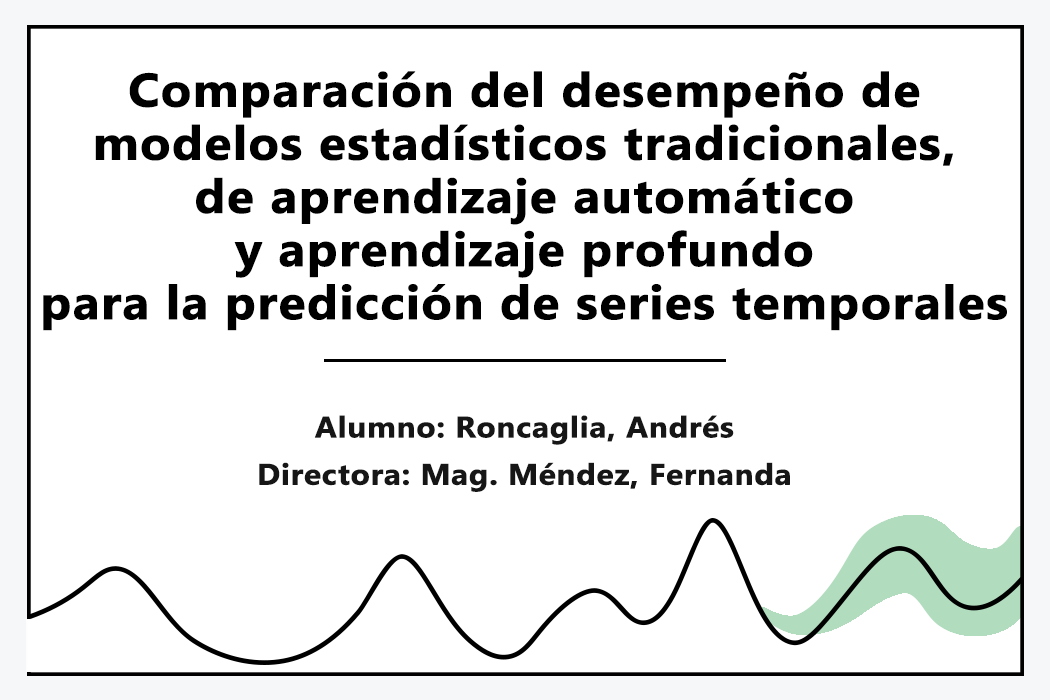
<style>
.page{position:relative;width:1050px;height:700px;background:#ffffff}
.page>*{position:absolute;margin:0}
.t1{font:47.2px/53.1px "Gadugi-Bold";color:#000000;font-weight:bold;scale:1.06 1}
.t2{font:29.5px/47.2px "Gadugi-Bold";color:#161616;font-weight:bold;scale:1.06 1}
</style>
<div class="page">
<p class="t1" style="left:43px;top:71px;width:964px;height:260px;text-align:center">Comparación del desempeño de modelos estadísticos tradicionales, <br>de aprendizaje automático <br>y aprendizaje profundo <br>para la predicción de series temporales</p>
<p class="t2" style="left:259px;top:415px;width:531px;height:77px;text-align:center">Alumno: Roncaglia, Andrés<br>Directora: Mag. Méndez, Fernanda</p>
</div>
